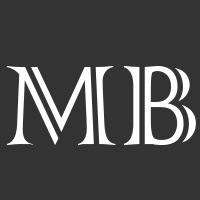
<style>
.page{position:relative;width:200px;height:200px;background:#333333}
.page>*{position:absolute;margin:0}
.t1{font:150px "ColonnaMT";color:#ffffff}
</style>
<div class="page">
<p class="t1" style="left:7px;top:66px;width:189px;height:79px">MB</p>
</div>
